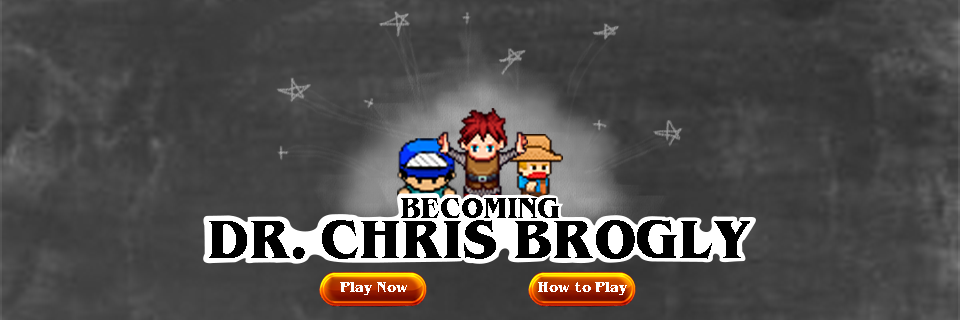
<style>
.page{position:relative;width:960px;height:320px}
.page>*{position:absolute;margin:0}
.t1{font:26.2px "BenguiatBold";color:#000000;scale:0.94 1}
.t2{font:49.2px "BenguiatBold";color:#000000;scale:0.94 1}
.t3{font:12.5px "BenguiatBold";color:#ffffff}
</style>
<div class="page">
<p class="t1" style="left:401px;top:198px;width:158px;height:20px">BECOMING</p>
<p class="t2" style="left:209px;top:220px;width:541px;height:39px">DR. CHRIS BROGLY</p>
<p class="t3" style="left:340px;top:282px;width:67px;height:13px">Play Now</p>
<p class="t3" style="left:538px;top:282px;width:89px;height:13px">How to Play</p>
</div>
